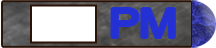
<style>
.page{position:relative;width:216px;height:48px;background:#ffffff}
.page>*{position:absolute;margin:0}
.t1{font:39.3px "ArialMT";color:#2430d4;scale:1.16 1}
</style>
<div class="page">
<p class="t1" style="left:112px;top:9px;width:62px;height:28px">PM</p>
</div>
